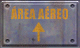
<style>
.page{position:relative;width:80px;height:48px}
.page>*{position:absolute;margin:0}
.t1{font:13px "Impact";letter-spacing:0.02em;color:#db9a29;scale:0.93 1}
.t2{font:13px "Impact";letter-spacing:0.02em;color:#d19327;scale:0.93 1}
</style>
<div class="page">
<p class="t1" style="left:11px;top:6px;width:57px;height:14px"><span class="t2">ÁREA </span>AÉREO</p>
</div>
